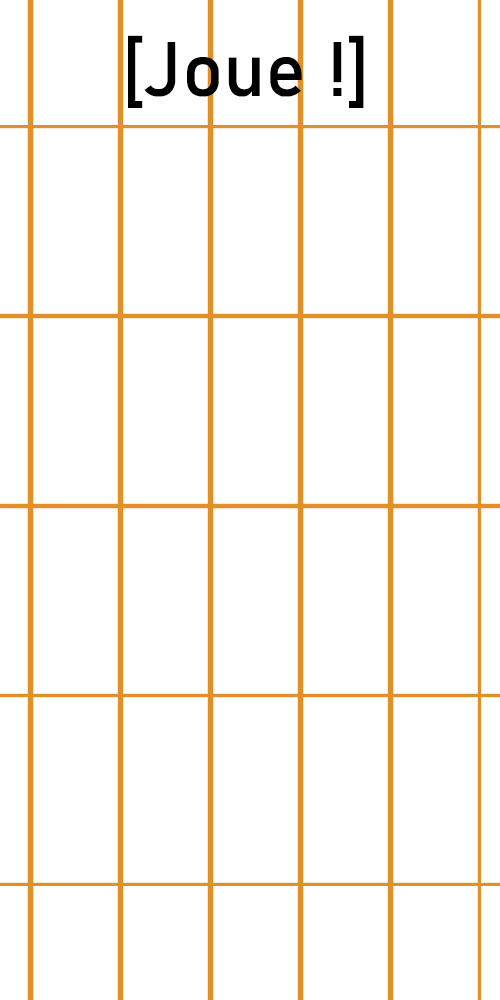
<style>
.page{position:relative;width:500px;height:1000px;background:#ffffff}
.page>*{position:absolute;margin:0}
.t1{font:129.9px "Bahnschrift";letter-spacing:0.005em;color:#000000}
</style>
<div class="page">
<p class="t1" style="left:128px;top:35px;width:236px;height:73px">[Joue !]</p>
</div>
